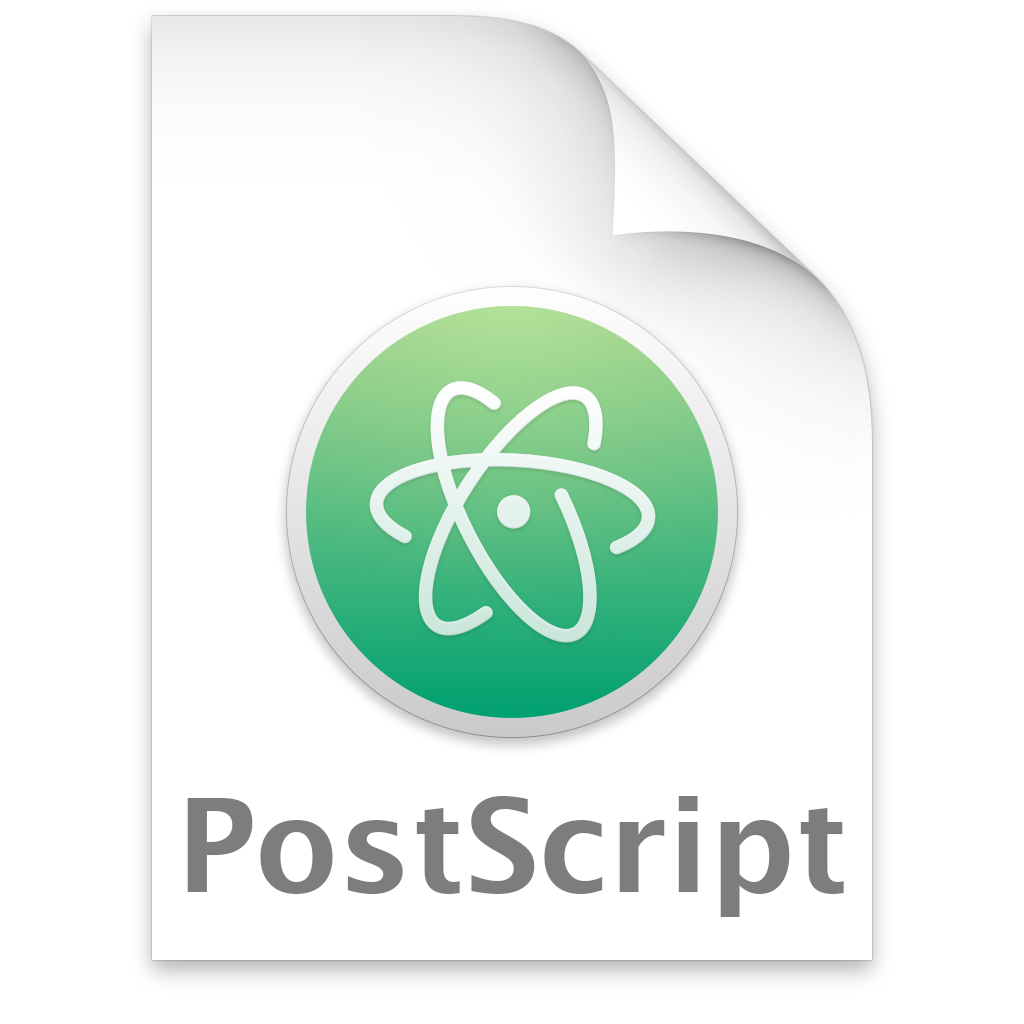
<style>
.page{position:relative;width:1024px;height:1024px;background:#ffffff}
.page>*{position:absolute;margin:0}
.t1{font:130px "LucidaGrande-Bold";color:#7d7d7d}
</style>
<div class="page">
<p class="t1" style="left:187px;top:796px;width:657px;height:121px">PostScript</p>
</div>
